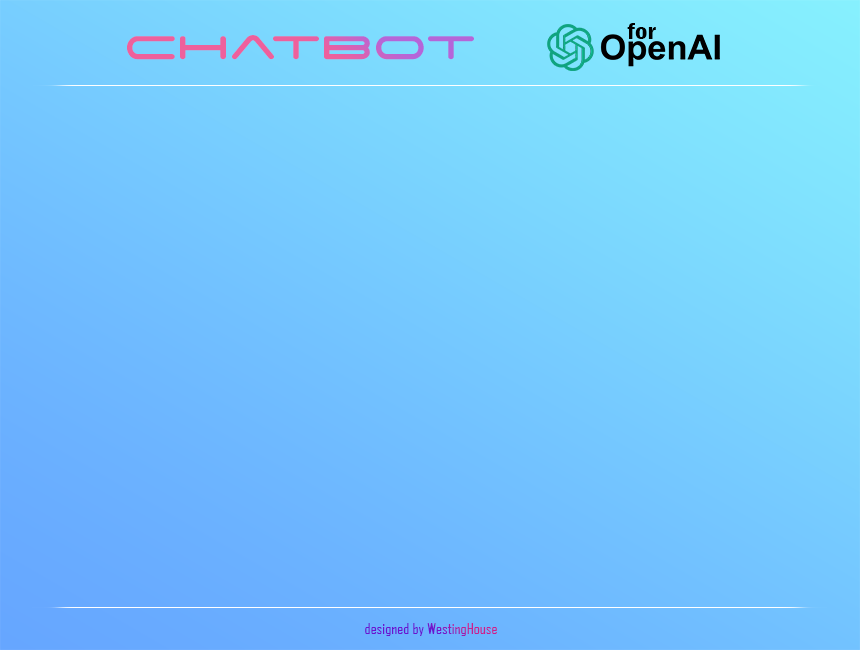
<style>
.page{position:relative;width:860px;height:650px}
.page>*{position:absolute;margin:0}
.t1{font:22.7px "FranklinGothic-DemiCond";color:#000000;scale:1.18 1}
.t2{font:52.8px "SpaceAge";scale:1.11 1}
.t3{font:13.6px "AgencyFB-Reg";scale:1.18 1}
</style>
<div class="page">
<p class="t1" style="left:627px;top:23px;width:29px;height:16px">for</p>
<p class="t2" style="left:127px;top:35px;width:347px;height:25px">ChatBot</p>
<p class="t3" style="left:365px;top:623px;width:132px;height:13px">designed by WestingHouse</p>
</div>
